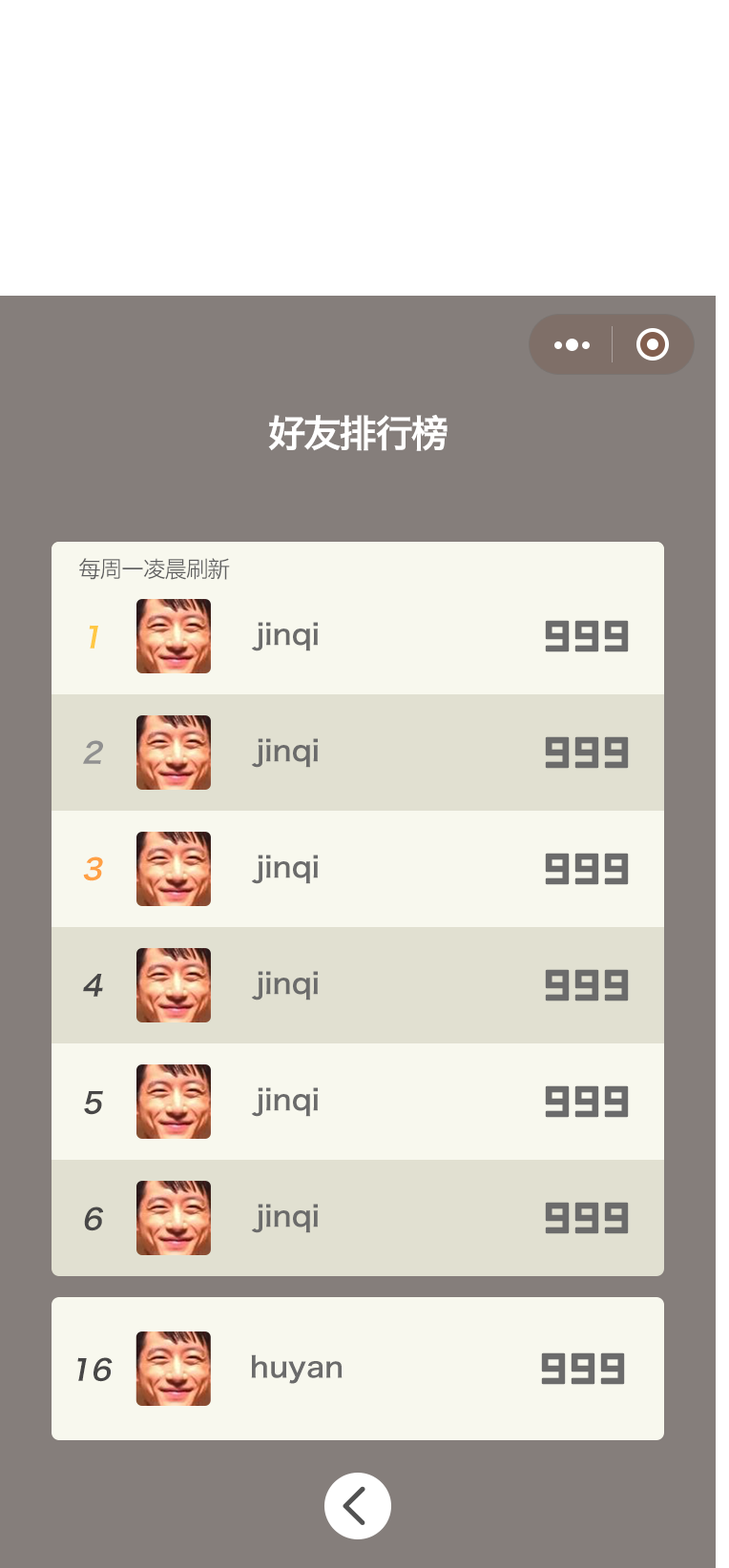
<style>
.page{position:relative;width:729px;height:1568px;background:#857e7b}
.page>*{position:absolute;margin:0}
.t1{font:38.2px "HiraginoSansGB-W6";letter-spacing:-0.06em;color:#ffffff}
.t2{font:22.9px "HiraginoSansGB-W3";letter-spacing:-0.06em;color:#606060}
.t3{font:28.6px "HiraginoSansGB-W6";color:#ffc844;font-style:italic}
.t4{font:28.6px "HiraginoSansGB-W6";color:#6b6b6b}
.t5{font:28.6px "HiraginoSansGB-W6";color:#909090;font-style:italic}
.t6{font:28.6px "HiraginoSansGB-W6";color:#ffa044;font-style:italic}
.t7{font:28.6px "HiraginoSansGB-W6";color:#484747;font-style:italic}
</style>
<div class="page">
<p class="t1" style="left:268px;top:414px;width:179px;height:37px">好友排行榜</p>
<p class="t2" style="left:79px;top:558px;width:151px;height:22px">每周一凌晨刷新</p>
<p class="t3" style="left:89px;top:625px;width:9px;height:24px">1</p>
<p class="t4" style="left:251px;top:622px;width:67px;height:29px">jinqi</p>
<p class="t5" style="left:83px;top:740px;width:20px;height:24px">2</p>
<p class="t4" style="left:251px;top:738px;width:67px;height:30px">jinqi</p>
<p class="t6" style="left:83px;top:856px;width:20px;height:25px">3</p>
<p class="t4" style="left:251px;top:855px;width:67px;height:29px">jinqi</p>
<p class="t7" style="left:83px;top:974px;width:20px;height:23px">4</p>
<p class="t4" style="left:251px;top:971px;width:67px;height:30px">jinqi</p>
<p class="t7" style="left:84px;top:1090px;width:19px;height:25px">5</p>
<p class="t4" style="left:251px;top:1087px;width:67px;height:30px">jinqi</p>
<p class="t4" style="left:251px;top:1204px;width:67px;height:29px">jinqi</p>
<p class="t7" style="left:84px;top:1207px;width:20px;height:24px">6</p>
<p class="t7" style="left:77px;top:1357px;width:36px;height:25px">16</p>
<p class="t4" style="left:251px;top:1354px;width:91px;height:30px">huyan</p>
</div>
